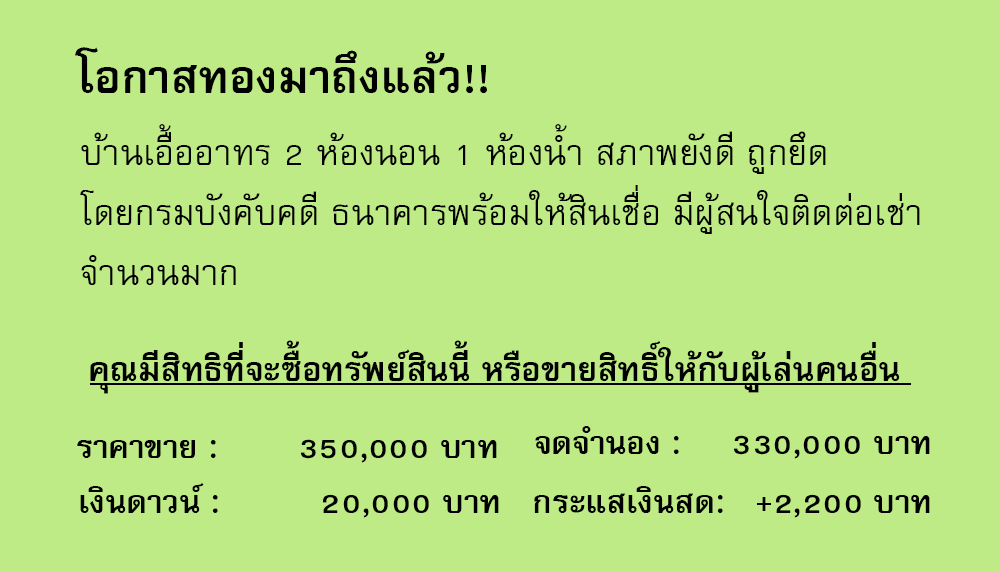
<style>
.page{position:relative;width:1000px;height:572px;background:#beeb85}
.page>*{position:absolute;margin:0}
.t1{font:64px "FreesiaUPCBold";color:#000000}
.t2{font:50px/60px "FreesiaUPC";color:#000000}
.t3{font:47px "FreesiaUPCBold";color:#000000}
.t4{font:45px "FreesiaUPCBold";color:#000000}
</style>
<div class="page">
<p class="t1" style="left:75px;top:47px;width:412px;height:46px">โอกาสทองมาถึงแล้ว!!</p>
<p class="t2" style="left:80px;top:124px;width:840px;height:161px">บ้านเอื้ออาทร 2 ห้องนอน 1 ห้องน้ำ สภาพยังดี ถูกยึด<br>โดยกรมบังคับคดี ธนาคารพร้อมให้สินเชื่อ มีผู้สนใจติดต่อเช่า<br>จำนวนมาก</p>
<p class="t3" style="left:90px;top:340px;width:810px;height:54px">คุณมีสิทธิที่จะซื้อทรัพย์สินนี้ หรือขายสิทธิ์ให้กับผู้เล่นคนอื่น</p>
<p class="t4" style="left:535px;top:426px;width:395px;height:33px">จดจำนอง :     330,000 บาท</p>
<p class="t4" style="left:77px;top:439px;width:420px;height:24px">ราคาขาย :        350,000 บาท</p>
<p class="t4" style="left:80px;top:482px;width:419px;height:36px">เงินดาวน์ :          20,000 บาท</p>
<p class="t4" style="left:534px;top:486px;width:396px;height:32px">กระแสเงินสด:   +2,200 บาท</p>
</div>
